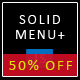
<style>
.page{position:relative;width:80px;height:80px;background:#000000}
.page>*{position:absolute;margin:0}
.t1{font:14.4px/15px "Calibri";letter-spacing:0.12em;color:#ffffff}
.t2{font:14.4px/15px "Calibri";letter-spacing:0.08em;color:#ffffff}
.t3{font:14.4px "Calibri-Bold";letter-spacing:0.08em;color:#d11f34}
.t4{font:15px "Calibri";letter-spacing:0.12em;color:#e0de10}
</style>
<div class="page">
<p class="t1" style="left:16px;top:15px;width:49px;height:24px;text-align:center">SOLID<br><span class="t2">MENU+</span></p>
<p class="t3" style="left:33px;top:54px;width:13px;height:9px">JS</p>
<p class="t4" style="left:9px;top:60px;width:64px;height:10px">50% OFF</p>
</div>
